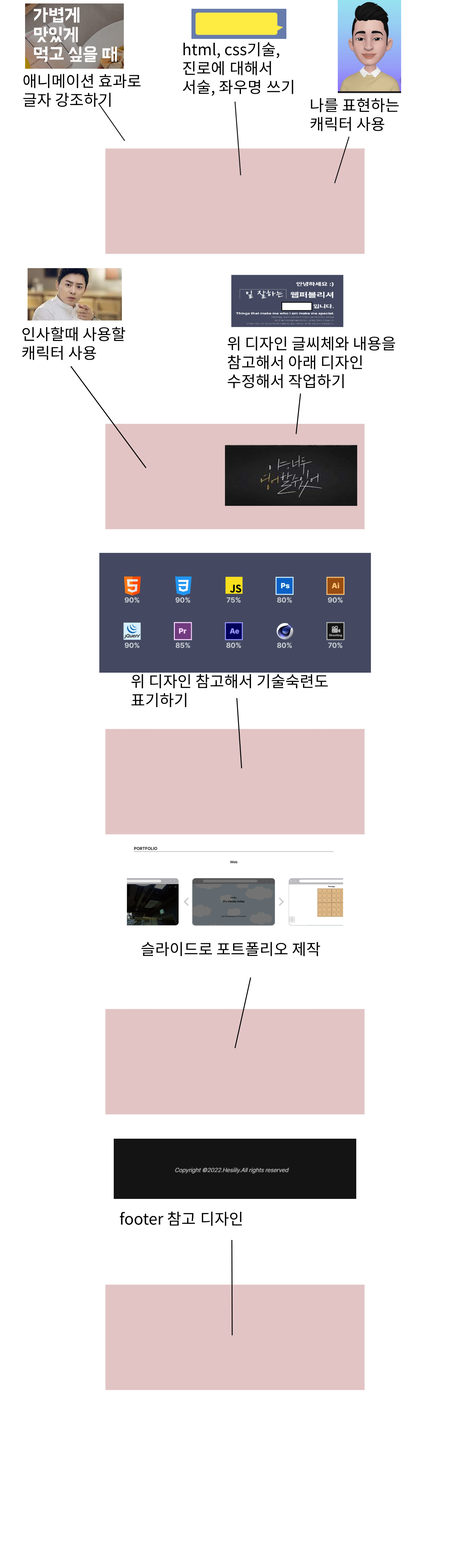
<style>
.page{position:relative;width:470px;height:1568px;background:#ffffff}
.page>*{position:absolute;margin:0}
.t1{font:15.7px "NotoSansKR-Regular";color:#000000}
</style>
<div class="page">
<p class="t1" style="left:183px;top:42px;width:111px;height:54px">html, css기술, 진로에 대해서 서술, 좌우명 쓰기</p>
<p class="t1" style="left:23px;top:74px;width:118px;height:33px">애니메이션 효과로 글자 강조하기</p>
<p class="t1" style="left:311px;top:98px;width:88px;height:33px">나를 표현하는 캐릭터 사용</p>
<p class="t1" style="left:22px;top:327px;width:103px;height:33px">인사할때 사용할 캐릭터 사용</p>
<p class="t1" style="left:228px;top:336px;width:167px;height:52px">위 디자인 글씨체와 내용을 참고해서 아래 디자인 수정해서 작업하기</p>
<p class="t1" style="left:131px;top:674px;width:197px;height:33px">위 디자인 참고해서 기술숙련도 표기하기</p>
<p class="t1" style="left:141px;top:942px;width:179px;height:14px">슬라이드로 포트폴리오 제작</p>
<p class="t1" style="left:120px;top:1211px;width:122px;height:15px">footer 참고 디자인</p>
</div>
